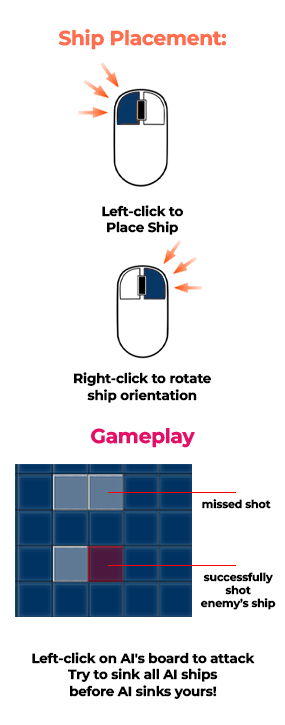
<style>
.page{position:relative;width:285px;height:725px;background:#ffffff}
.page>*{position:absolute;margin:0}
.t1{font:20px "MontserratRoman-Bold";letter-spacing:-0.01em;color:#ff6d50}
.t2{font:13.4px "MontserratRoman-Bold";letter-spacing:-0.01em;color:#000000}
.t3{font:20px "MontserratRoman-Bold";letter-spacing:-0.01em;color:#e40f66}
.t4{font:11px "MontserratRoman-Bold";letter-spacing:-0.01em;color:#000000}
</style>
<div class="page">
<p class="t1" style="left:58px;top:29px;width:168px;height:21px">Ship Placement:</p>
<p class="t2" style="left:102px;top:205px;width:81px;height:30px;text-align:center">Left-click to<br>Place Ship</p>
<p class="t2" style="left:74px;top:372px;width:137px;height:31px;text-align:center">Right-click to rotate ship orientation</p>
<p class="t3" style="left:91px;top:428px;width:104px;height:20px">Gameplay</p>
<p class="t4" style="left:202px;top:499px;width:69px;height:10px">missed shot</p>
<p class="t4" style="left:200px;top:572px;width:76px;height:38px;text-align:center">successfully<br>shot<br>enemy’s ship</p>
<p class="t2" style="left:32px;top:652px;width:223px;height:47px;text-align:center">Left-click on AI's board to attack<br>Try to sink all AI ships<br>before AI sinks yours!</p>
</div>
